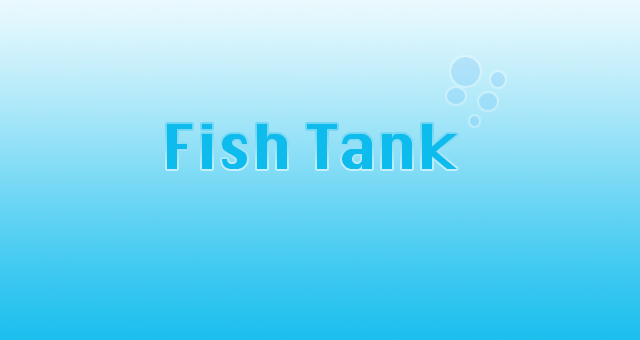
<style>
.page{position:relative;width:640px;height:340px}
.page>*{position:absolute;margin:0}
.t1{font:60px "Krungthep";color:#0dbbed}
</style>
<div class="page">
<p class="t1" style="left:167px;top:124px;width:290px;height:45px">Fish Tank</p>
</div>
